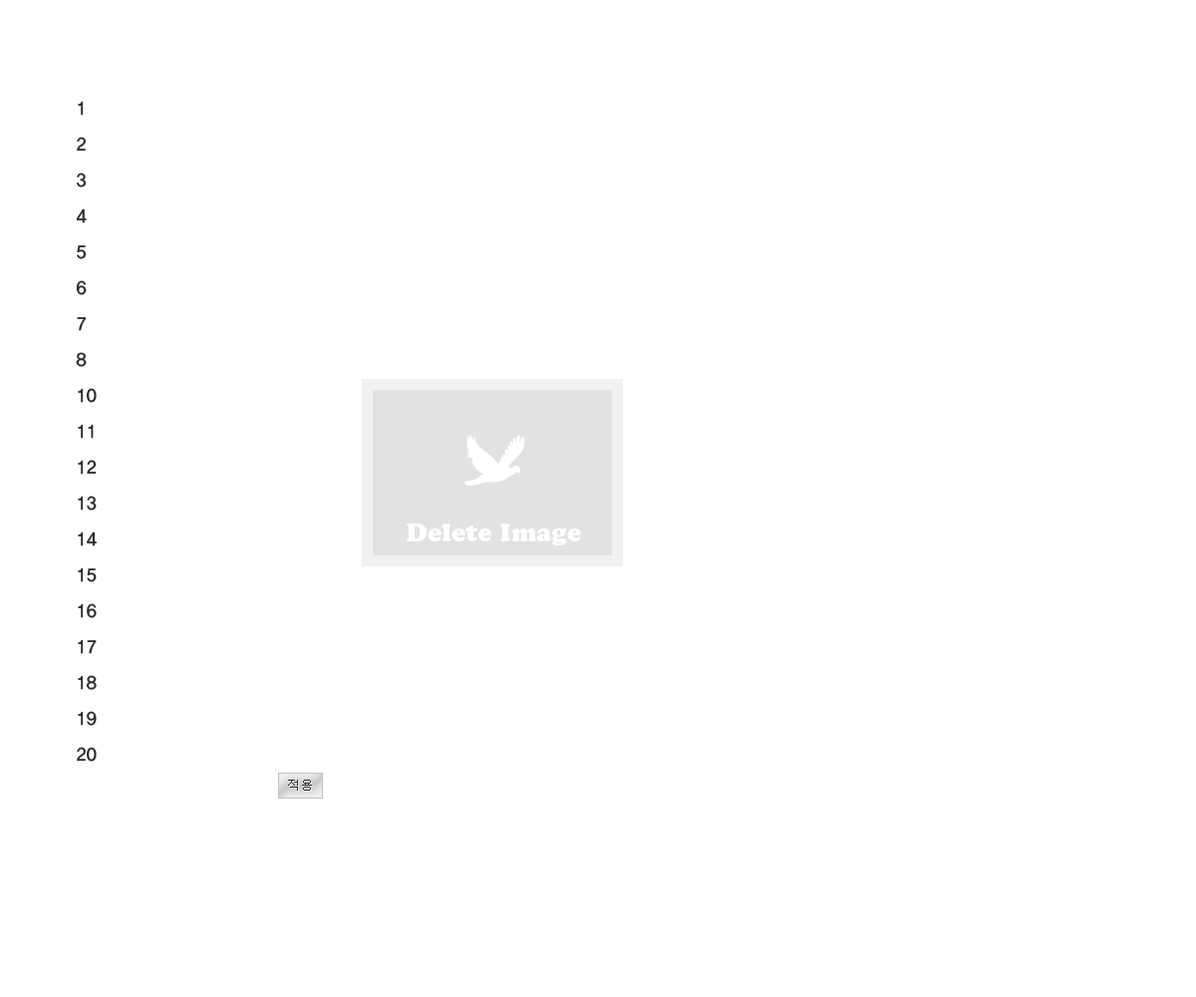
<style>
.page{position:relative;width:1196px;height:997px;background:#ffffff}
.page>*{position:absolute;margin:0}
.t1{font:17.9px/35.9px "YDIYGO340";letter-spacing:0.01em;color:#2c2c2c}
.t2{font:24.9px "CooperBlackStd";letter-spacing:0.01em;color:#ffffff}
.t3{font:12px "Dotum";letter-spacing:0.01em;color:#2c2c2c}
</style>
<div class="page">
<p class="t1" style="left:76px;top:101px;width:21px;height:661px">1<br>2<br>3<br>4<br>5<br>6<br>7<br>8<br>10<br>11<br>12<br>13<br>14<br>15<br>16<br>17<br>18<br>19<br>20</p>
<p class="t2" style="left:406px;top:523px;width:175px;height:22px">Delete Image</p>
<p class="t3" style="left:288px;top:780px;width:24px;height:10px">적용</p>
</div>
